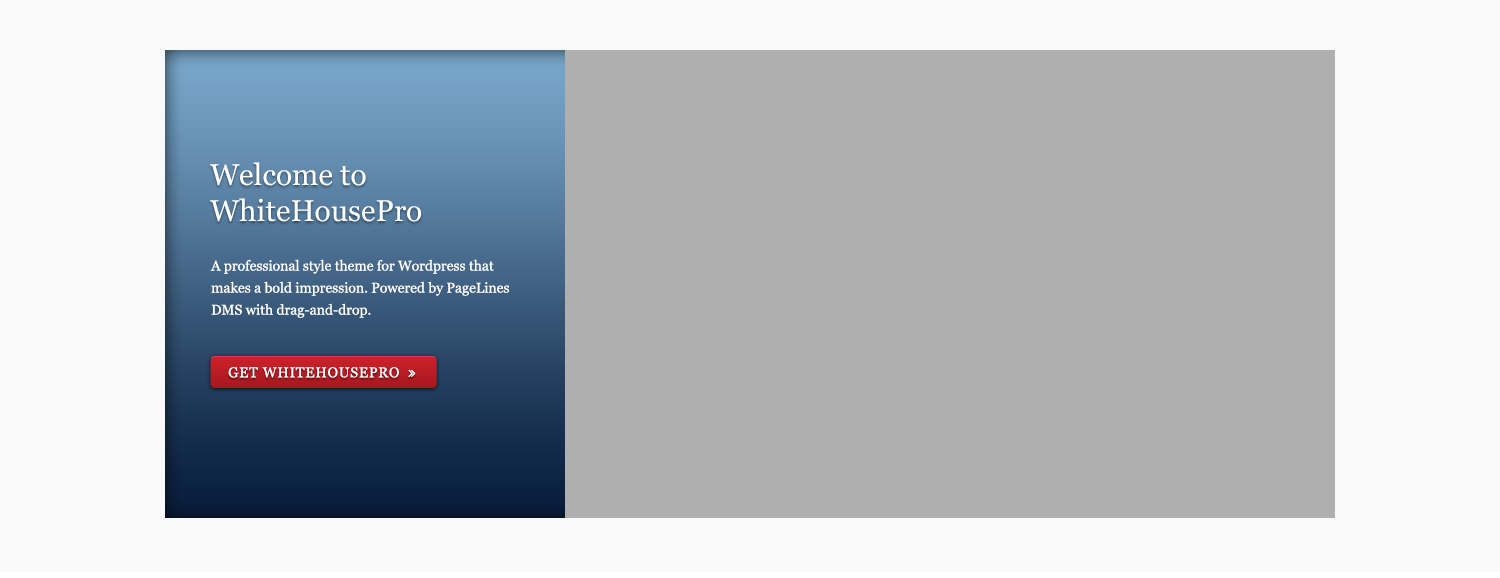
<style>
.page{position:relative;width:1500px;height:578px;background:#afafaf}
.page>*{position:absolute;margin:0}
.t1{font:30px "Georgia";color:#ffffff}
.t2{font:14px/22px "Georgia";color:#ffffff}
</style>
<div class="page">
<p class="t1" style="left:210px;top:162px;width:212px;height:60px">Welcome to <br>WhiteHousePro</p>
<p class="t2" style="left:210px;top:259px;width:299px;height:59px">A professional style theme for Wordpress that makes a bold impression. Powered by PageLines DMS with drag-and-drop.</p>
</div>
